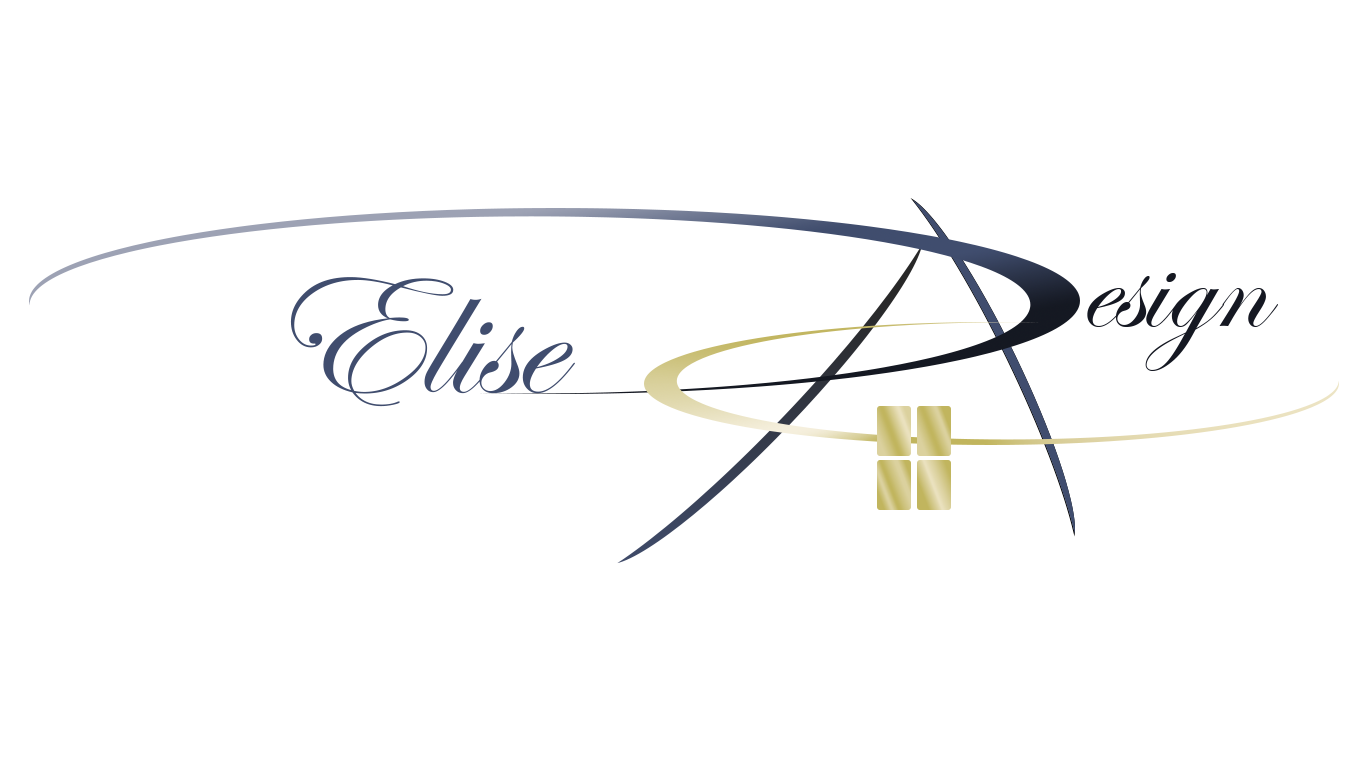
<style>
.page{position:relative;width:1366px;height:768px;background:#ffffff}
.page>*{position:absolute;margin:0}
.t1{font:183.8px "EdwardianScriptITC";color:#404d6e}
.t2{font:139.2px "EdwardianScriptITC";color:#151822}
</style>
<div class="page">
<p class="t1" style="left:290px;top:277px;width:285px;height:130px">Elise</p>
<p class="t2" style="left:1087px;top:273px;width:191px;height:98px">esign</p>
</div>
